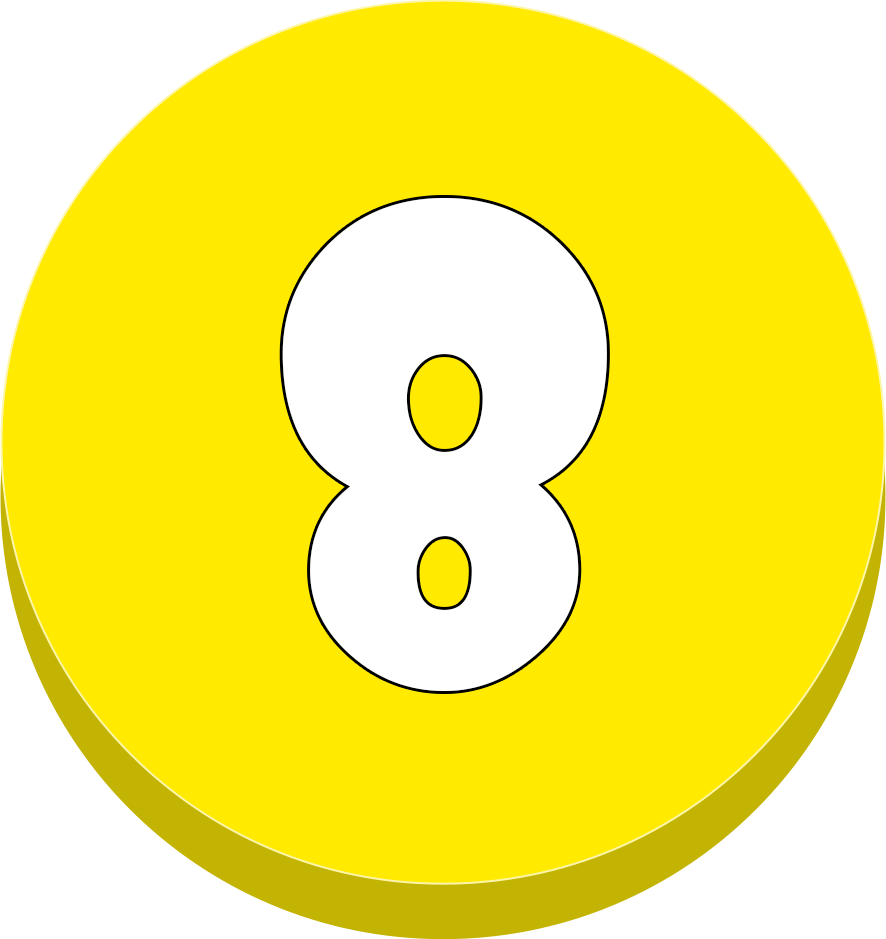
<style>
.page{position:relative;width:886px;height:939px;background:#ffea00}
.page>*{position:absolute;margin:0}
.t1{font:637.2px "ShowcardGothic-Reg";color:#ffffff}
</style>
<div class="page">
<p class="t1" style="left:282px;top:198px;width:325px;height:493px">8</p>
</div>
